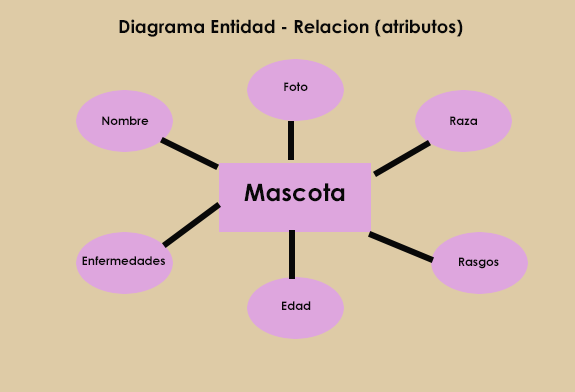
<style>
.page{position:relative;width:575px;height:392px;background:#decba6}
.page>*{position:absolute;margin:0}
.t1{font:18px "CenturyGothic-Bold";color:#080808}
.t2{font:12px "CenturyGothic-Bold";color:#080808}
.t3{font:24px "CenturyGothic-Bold";color:#080808}
</style>
<div class="page">
<p class="t1" style="left:119px;top:19px;width:344px;height:18px">Diagrama Entidad - Relacion (atributos)</p>
<p class="t2" style="left:284px;top:82px;width:24px;height:9px">Foto</p>
<p class="t2" style="left:102px;top:116px;width:47px;height:9px">Nombre</p>
<p class="t2" style="left:450px;top:116px;width:27px;height:9px">Raza</p>
<p class="t3" style="left:244px;top:183px;width:101px;height:19px">Mascota</p>
<p class="t2" style="left:82px;top:256px;width:83px;height:9px">Enfermedades</p>
<p class="t2" style="left:459px;top:257px;width:40px;height:12px">Rasgos</p>
<p class="t2" style="left:282px;top:301px;width:29px;height:9px">Edad</p>
</div>
